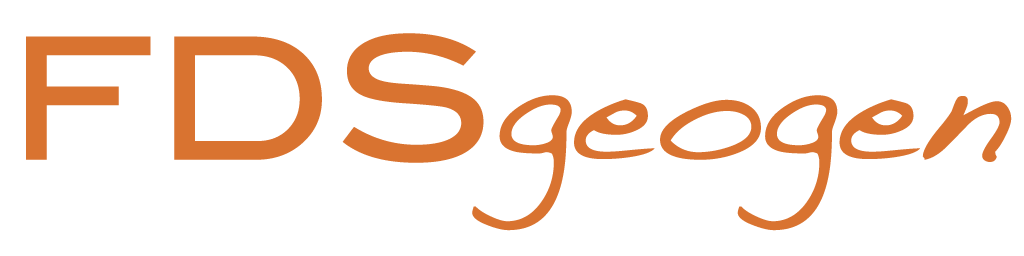
<style>
.page{position:relative;width:1024px;height:256px;background:#ffffff}
.page>*{position:absolute;margin:0}
.t1{font:170px "Handwriting-Dakota";color:#d97330}
.t2{font:170px "BlairMdITCTTMedium";color:#d97330}
</style>
<div class="page">
<p class="t1" style="left:26px;top:33px;width:986px;height:198px"><span class="t2">FDS</span>geogen</p>
</div>
